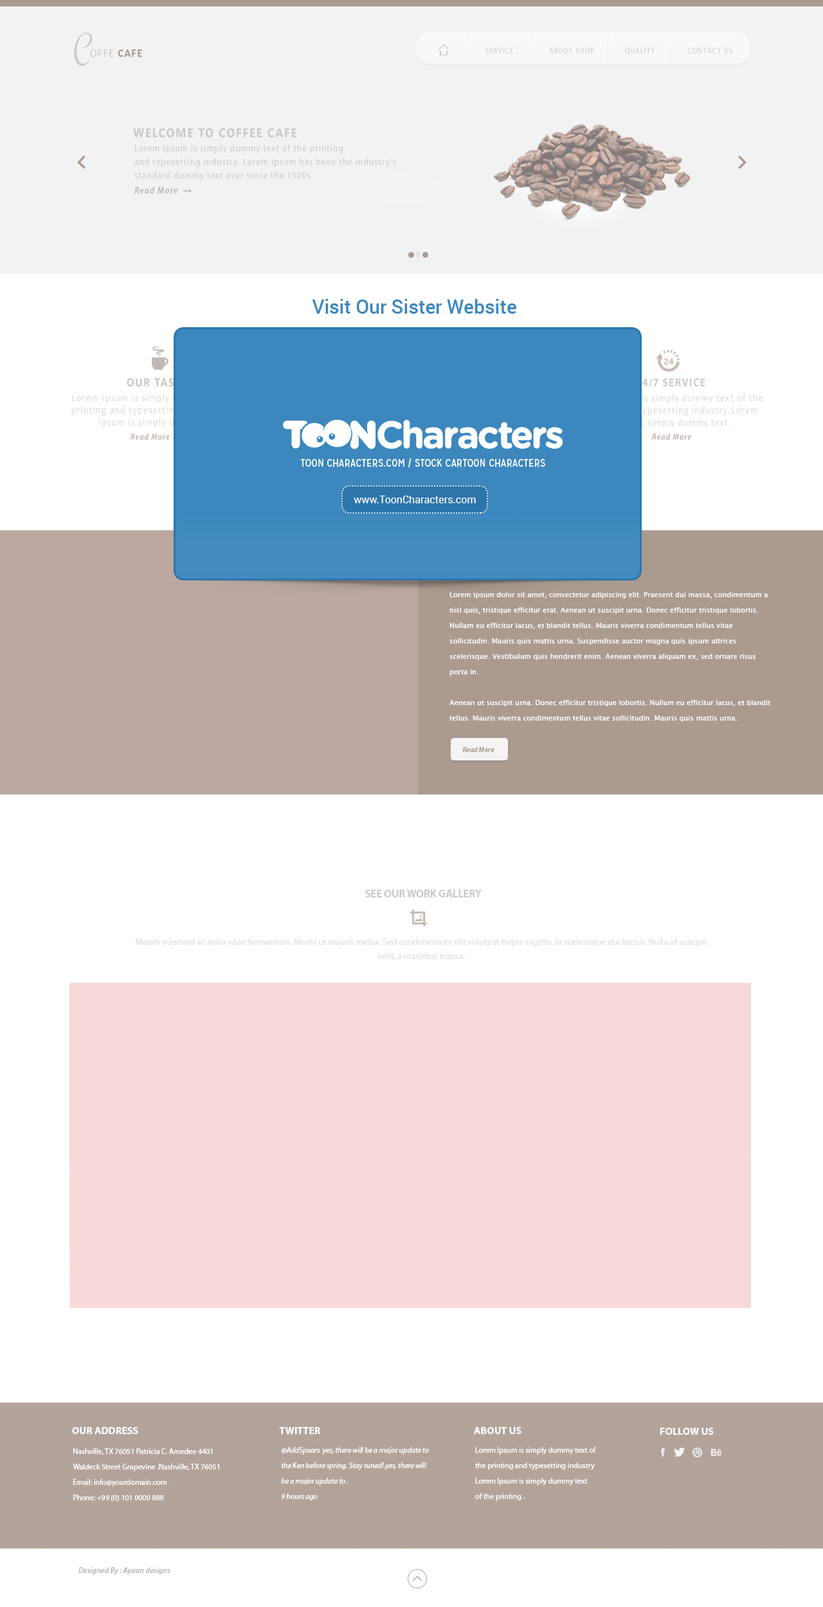
<style>
.page{position:relative;width:823px;height:1607px;background:#ffffff}
.page>*{position:absolute;margin:0}
.t1{font:39px "Montez-Regular";letter-spacing:0.095em;color:#c9c9c9;scale:0.86 1}
.t2{font:10.1px "LucidaSansUnicode";letter-spacing:0.095em;color:#9d9c9d;scale:0.87 1}
.t3{font:10.1px "Lato-Black";letter-spacing:0.095em;color:#664735;scale:0.87 1}
.t4{font:7.2px "LucidaSansUnicode";letter-spacing:0.095em;color:#c9c9c9;scale:0.87 1}
.t5{font:12.8px "NirmalaUI-Bold";letter-spacing:0.095em;color:#c9c9c9;scale:0.86 1}
.t6{font:9.6px/13.5px "MyriadPro-Regular";letter-spacing:0.095em;color:#c9c9c9;scale:0.86 1}
.t7{font:9.6px "MyriadPro-SemiboldIt";letter-spacing:0.095em;color:#b0afaf;scale:0.86 1}
.t8{font:11.5px "NirmalaUI-Bold";letter-spacing:0.095em;color:#c9c9c9;scale:0.87 1}
.t9{font:11.5px "MyriadPro-Bold";letter-spacing:0.095em;color:#c9c9c9;scale:0.87 1}
.t10{font:8.6px "MyriadPro-SemiboldIt";letter-spacing:0.095em;color:#baa99f;scale:0.87 1}
.t11{font:7.1px/15.4px "LucidaSansUnicode";color:#ffffff}
.t12{font:7.1px "MyriadPro-SemiboldIt";color:#ab9a90}
.t13{font:10.9px "MyriadPro-Bold";letter-spacing:-0.02em;color:#c9c9c9;text-transform:uppercase}
.t14{font:9px/14.5px "MyriadPro-Regular";color:#dfdfdf}
.t15{font:10.3px "MyriadPro-Bold";color:#ffffff}
.t16{font:7.7px "MyriadPro-Regular";color:#ffffff}
.t17{font:7.7px/15.4px "MyriadPro-Regular";color:#ffffff}
.t18{font:7.7px/15.4px "MyriadPro-It";color:#ffffff}
.t19{font:10.3px/15.4px "MyriadPro-Regular";color:#ffffff}
.t20{font:7.7px "MyriadPro-It";letter-spacing:0.025em;color:#ababab}
</style>
<div class="page">
<p class="t1" style="left:74px;top:33px;width:19px;height:33px">C</p>
<p class="t2" style="left:90px;top:49px;width:52px;height:8px">OFFE <span class="t3">CAFE</span></p>
<p class="t4" style="left:485px;top:48px;width:29px;height:6px">SERVICE</p>
<p class="t4" style="left:549px;top:48px;width:45px;height:6px">ABOUT SHOP</p>
<p class="t4" style="left:625px;top:48px;width:30px;height:7px">QUALITY</p>
<p class="t4" style="left:687px;top:48px;width:45px;height:6px">CONTACT US</p>
<p class="t5" style="left:133px;top:128px;width:163px;height:10px">WELCOME TO COFFEE CAFE</p>
<p class="t6" style="left:134px;top:144px;width:262px;height:37px">Lorem Ipsum is simply dummy text of the printing <br>and typesetting industry. Lorem Ipsum has been the industry's <br>standard dummy text ever since the 1500s</p>
<p class="t7" style="left:134px;top:186px;width:44px;height:8px">Read More</p>
<p class="t8" style="left:127px;top:378px;width:60px;height:9px">OUR TASTE</p>
<p class="t9" style="left:636px;top:378px;width:69px;height:9px">24/7 SERVICE</p>
<p class="t10" style="left:131px;top:433px;width:39px;height:7px">Read More</p>
<p class="t10" style="left:652px;top:433px;width:39px;height:7px">Read More</p>
<p class="t11" style="left:449px;top:592px;width:321px;height:130px">Lorem ipsum dolor sit amet, consectetur adipiscing elit. Praesent dui massa, condimentum a nisl quis, tristique efficitur erat. Aenean ut suscipit urna. Donec efficitur tristique lobortis. Nullam eu efficitur lacus, et blandit tellus. Mauris viverra condimentum tellus vitae sollicitudin. Mauris quis mattis urna. Suspendisse auctor magna quis ipsum ultrices scelerisque. Vestibulum quis hendrerit enim. Aenean viverra aliquam ex, sed ornare risus porta in.<br><br>Aenean ut suscipit urna. Donec efficitur tristique lobortis. Nullam eu efficitur lacus, et blandit tellus. Mauris viverra condimentum tellus vitae sollicitudin. Mauris quis mattis urna.</p>
<p class="t12" style="left:462px;top:747px;width:32px;height:5px">Read More</p>
<p class="t13" style="left:365px;top:890px;width:117px;height:7px">See our work GALLERY</p>
<p class="t14" style="left:136px;top:939px;width:571px;height:21px;text-align:center">Mauris euismod ac nulla vitae fermentum. Morbi ut mauris massa. Sed condimentum elit volutpat turpis sagittis, in scelerisque dui luctus. Nulla id suscipit velit, a maximus massa.</p>
<p class="t15" style="left:72px;top:1427px;width:66px;height:7px">OUR ADDRESS</p>
<p class="t15" style="left:279px;top:1427px;width:41px;height:7px"><span class="t16">    <br></span>    TWITTER</p>
<p class="t15" style="left:474px;top:1427px;width:47px;height:7px"><span class="t16">    <br></span>ABOUT US</p>
<p class="t15" style="left:660px;top:1428px;width:54px;height:7px"><span class="t16">    <br></span>FOLLOW US</p>
<p class="t17" style="left:73px;top:1448px;width:146px;height:54px">Nashville, TX 76051 Patricia C. Amedee 4401 <br>Waldeck Street Grapevine .Nashville, TX 76051<br>Email: info@yourdomain.com<br>Phone: +99 (0) 101 0000 888<br><br>Phone: +99 (0) 101 0000 888<br> <br>Phone: +99 (0) 101 0000 888<br>Phone: +99 (0) 101 0000 888</p>
<p class="t18" style="left:281px;top:1447px;width:148px;height:53px"><span class="t19"><br></span>  @AddSpears  yes, there will be a major update to <br>  the Ken before spring. Stay tuned!.yes, there will <br>  be a major update to . <br>  9 hours ago</p>
<p class="t17" style="left:475px;top:1447px;width:121px;height:54px">Lorem Ipsum is simply dummy text of <br>the printing and typesetting industry<br>Lorem Ipsum is simply dummy text <br>of the printing .</p>
<p class="t20" style="left:78px;top:1567px;width:92px;height:8px">Designed By : Ayaan designs</p>
</div>
